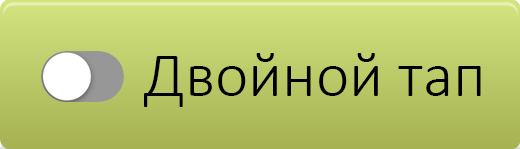
<style>
.page{position:relative;width:520px;height:149px}
.page>*{position:absolute;margin:0}
.t1{font:64px "Calibri-Light";color:#000000}
</style>
<div class="page">
<p class="t1" style="left:144px;top:53px;width:337px;height:54px">Двойной тап</p>
</div>
